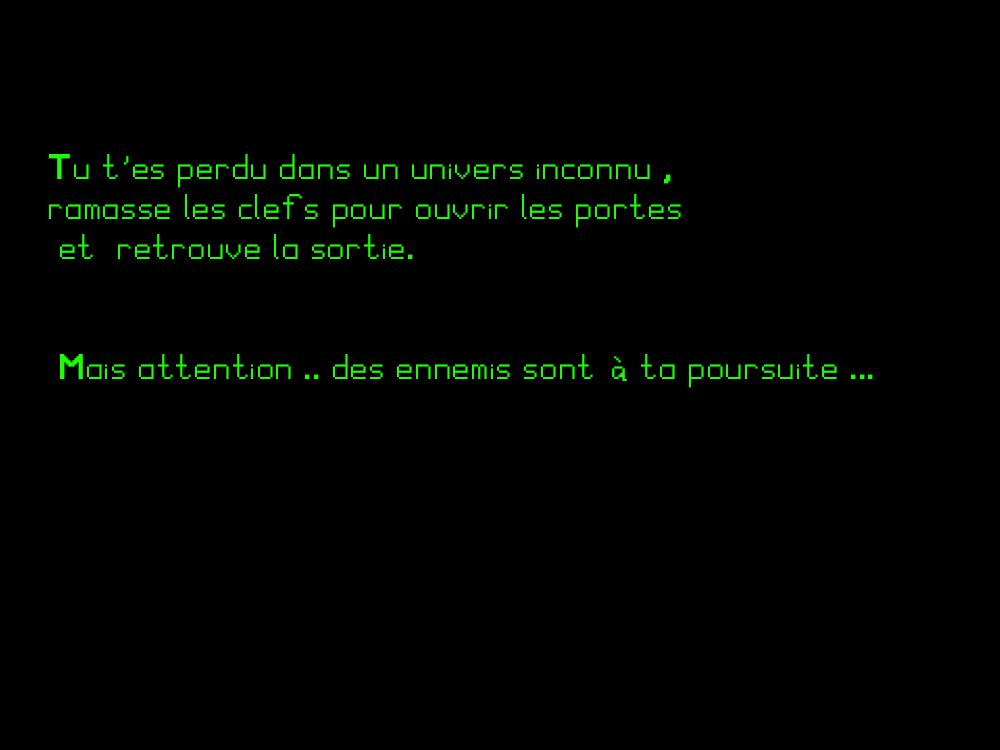
<style>
.page{position:relative;width:1000px;height:750px;background:#000000}
.page>*{position:absolute;margin:0}
.t1{font:33.3px "PixelGameFont";color:#1efc07}
</style>
<div class="page">
<p class="t1" style="left:49px;top:154px;width:824px;height:234px">Tu t'es perdu dans un univers inconnu , <br>ramasse les clefs pour ouvrir les portes<br> et  retrouve la sortie.<br><br><br> Mais attention .. des ennemis sont à ta poursuite ...</p>
</div>
